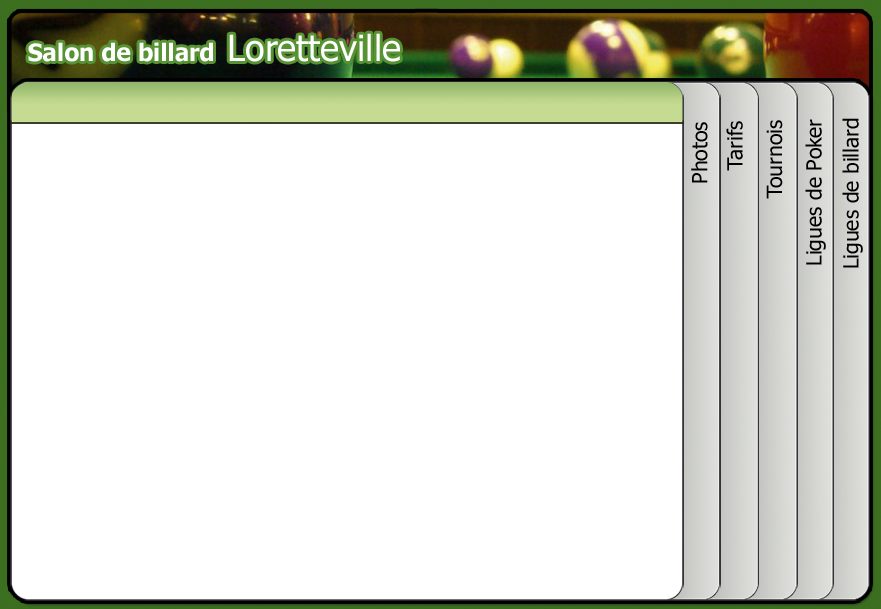
<style>
.page{position:relative;width:881px;height:609px;background:#ffffff}
.page>*{position:absolute;margin:0}
.t1{font:24px "Tahoma-Bold";color:#ffffff}
.t2{font:36px "Tahoma";color:#ffffff}
.t3{font:21.1px "Tahoma";color:#010000}
</style>
<div class="page">
<p class="t1" style="left:28px;top:33px;width:372px;height:29px">Salon de billard <span class="t2">Loretteville</span></p>
<p class="t3" style="left:691px;top:122px;width:17px;height:61px;rotate:-90deg">Photos</p>
<p class="t3" style="left:726px;top:121px;width:17px;height:50px;rotate:-90deg">Tarifs</p>
<p class="t3" style="left:766px;top:120px;width:17px;height:79px;rotate:-90deg">Tournois</p>
<p class="t3" style="left:805px;top:119px;width:21px;height:146px;rotate:-90deg">Ligues de Poker</p>
<p class="t3" style="left:842px;top:118px;width:21px;height:150px;rotate:-90deg">Ligues de billard</p>
</div>
